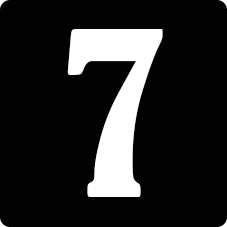
<style>
.page{position:relative;width:227px;height:227px;background:#020203}
.page>*{position:absolute;margin:0}
.t1{font:216px "BernardMT-Condensed";color:#ffffff}
</style>
<div class="page">
<p class="t1" style="left:67px;top:29px;width:96px;height:168px">7</p>
</div>
